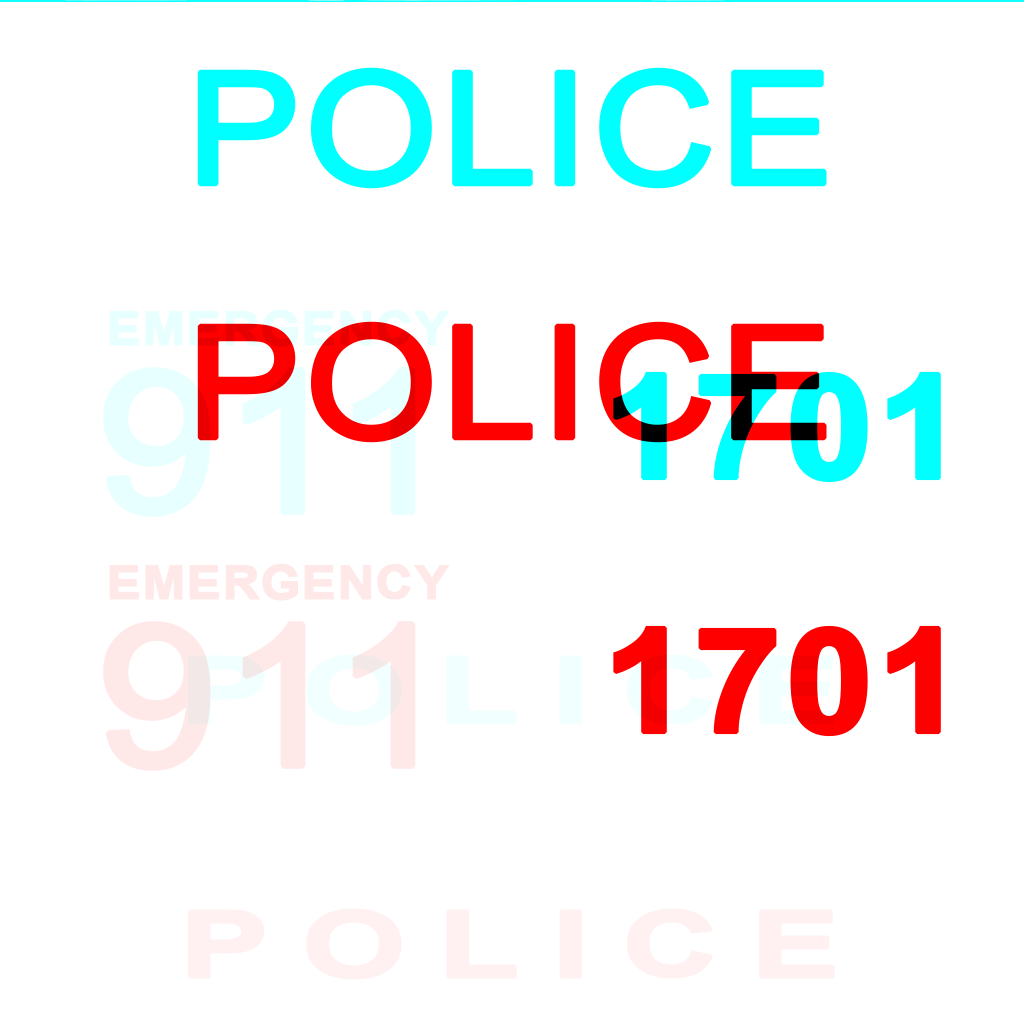
<style>
.page{position:relative;width:1024px;height:1024px;background:#ffffff}
.page>*{position:absolute;margin:0}
.t1{font:156px "ArialMT";color:#00ffff;font-weight:bold;scale:1.09 1}
.t2{font:47px/150px "Arial-BoldMT";color:#e8e8e8;font-weight:bold;scale:1.09 1}
.t3{font:198px/167px "ArialMT";color:#e8e8e8;font-weight:bold;scale:1.09 1}
.t4{font:144px "Arial-BoldMT";color:#00ffff;font-weight:bold;scale:1.09 1}
.t5{font:91.5px "Arial-BoldMT";letter-spacing:0.22em;color:#f2f1f1;font-weight:bold;scale:1.45 1}
</style>
<div class="page">
<p class="t1" style="left:197px;top:65px;width:630px;height:122px">POLICE</p>
<p class="t2" style="left:103px;top:308px;width:347px;height:207px;text-align:center">EMERGENCY<br><span class="t3">911</span></p>
<p class="t4" style="left:613px;top:369px;width:328px;height:112px">1701</p>
<p class="t5" style="left:188px;top:652px;width:647px;height:72px">POLICE</p>
</div>
